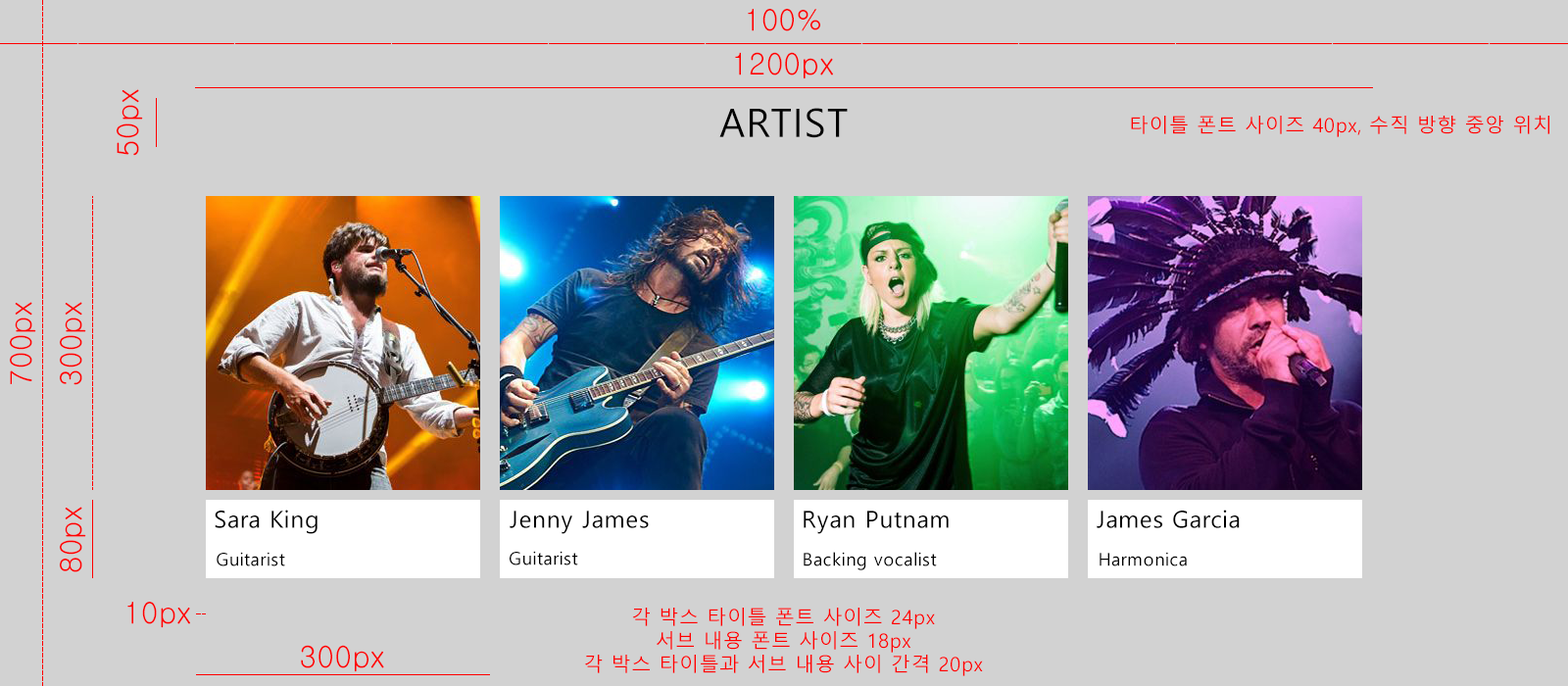
<style>
.page{position:relative;width:1568px;height:686px;background:#d2d2d2}
.page>*{position:absolute;margin:0}
.t1{font:29.4px "Gulim";letter-spacing:0.03em;color:#ff0000}
.t2{font:29.7px "Gulim";letter-spacing:0.03em;color:#ff0000}
.t3{font:39.2px "MalgunGothic";letter-spacing:0.03em;color:#000000}
.t4{font:19.6px "MalgunGothic";letter-spacing:0.03em;color:#ff0000}
.t5{font:23.5px "MalgunGothic";letter-spacing:0.03em;color:#000000}
.t6{font:17.6px "MalgunGothic";letter-spacing:0.03em;color:#000000}
.t7{font:29.3px "Gulim";letter-spacing:0.03em;color:#ff0000}
.t8{font:29.6px "Gulim";letter-spacing:0.03em;color:#ff0000}
</style>
<div class="page">
<p class="t1" style="left:748px;top:9px;width:72px;height:22px">100%</p>
<p class="t2" style="left:735px;top:52px;width:98px;height:27px">1200px</p>
<p class="t1" style="left:117px;top:89px;width:26px;height:67px;rotate:-90deg">50px</p>
<p class="t3" style="left:719px;top:108px;width:129px;height:30px">ARTIST</p>
<p class="t4" style="left:1131px;top:115px;width:418px;height:22px">타이틀 폰트 사이즈 40px, 수직 방향 중앙 위치</p>
<p class="t1" style="left:10px;top:302px;width:26px;height:82px;rotate:-90deg">700px</p>
<p class="t1" style="left:60px;top:302px;width:26px;height:83px;rotate:-90deg">300px</p>
<p class="t1" style="left:60px;top:507px;width:26px;height:65px;rotate:-90deg">80px</p>
<p class="t5" style="left:215px;top:510px;width:103px;height:24px">Sara King</p>
<p class="t5" style="left:1097px;top:510px;width:143px;height:18px">James Garcia</p>
<p class="t5" style="left:510px;top:511px;width:139px;height:23px">Jenny James</p>
<p class="t5" style="left:804px;top:511px;width:145px;height:23px">Ryan Putnam</p>
<p class="t6" style="left:217px;top:552px;width:68px;height:14px">Guitarist</p>
<p class="t6" style="left:510px;top:551px;width:68px;height:14px">Guitarist</p>
<p class="t6" style="left:804px;top:552px;width:133px;height:18px">Backing vocalist</p>
<p class="t6" style="left:1100px;top:552px;width:87px;height:14px">Harmonica</p>
<p class="t7" style="left:127px;top:602px;width:63px;height:26px">10px</p>
<p class="t4" style="left:585px;top:608px;width:398px;height:68px;text-align:center">각 박스 타이틀 폰트 사이즈 24px<br>서브 내용 폰트 사이즈 18px<br>각 박스 타이틀과 서브 내용 사이 간격 20px</p>
<p class="t8" style="left:301px;top:645px;width:83px;height:27px">300px</p>
</div>
